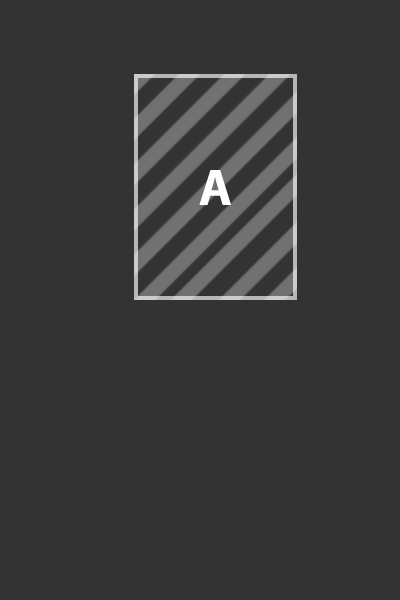
<style>
.page{position:relative;width:400px;height:600px;background:#333333}
.page>*{position:absolute;margin:0}
.t1{font:45px "AdobeGothicStd-Bold";letter-spacing:-0.05em;color:#ffffff;font-weight:bold;scale:1.11 1}
</style>
<div class="page">
<p class="t1" style="left:199px;top:170px;width:32px;height:35px">A</p>
</div>
